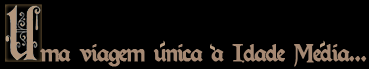
<style>
.page{position:relative;width:369px;height:69px;background:#000000}
.page>*{position:absolute;margin:0}
.t1{font:17px "PerryGothic";letter-spacing:-0.025em;color:#ba9e83}
.t2{font:21.5px "Kelmscott-Regular";letter-spacing:-0.075em;color:#a68973;font-weight:bold}
</style>
<div class="page">
<p class="t1" style="left:160px;top:40px;width:5px;height:9px;rotate:-48deg">~</p>
<p class="t1" style="left:320px;top:40px;width:5px;height:9px;rotate:-48deg">~</p>
<p class="t2" style="left:40px;top:44px;width:327px;height:23px">ma viagem unica a Idade Media...</p>
<p class="t1" style="left:210px;top:43px;width:5px;height:9px;rotate:-132deg">~</p>
</div>
